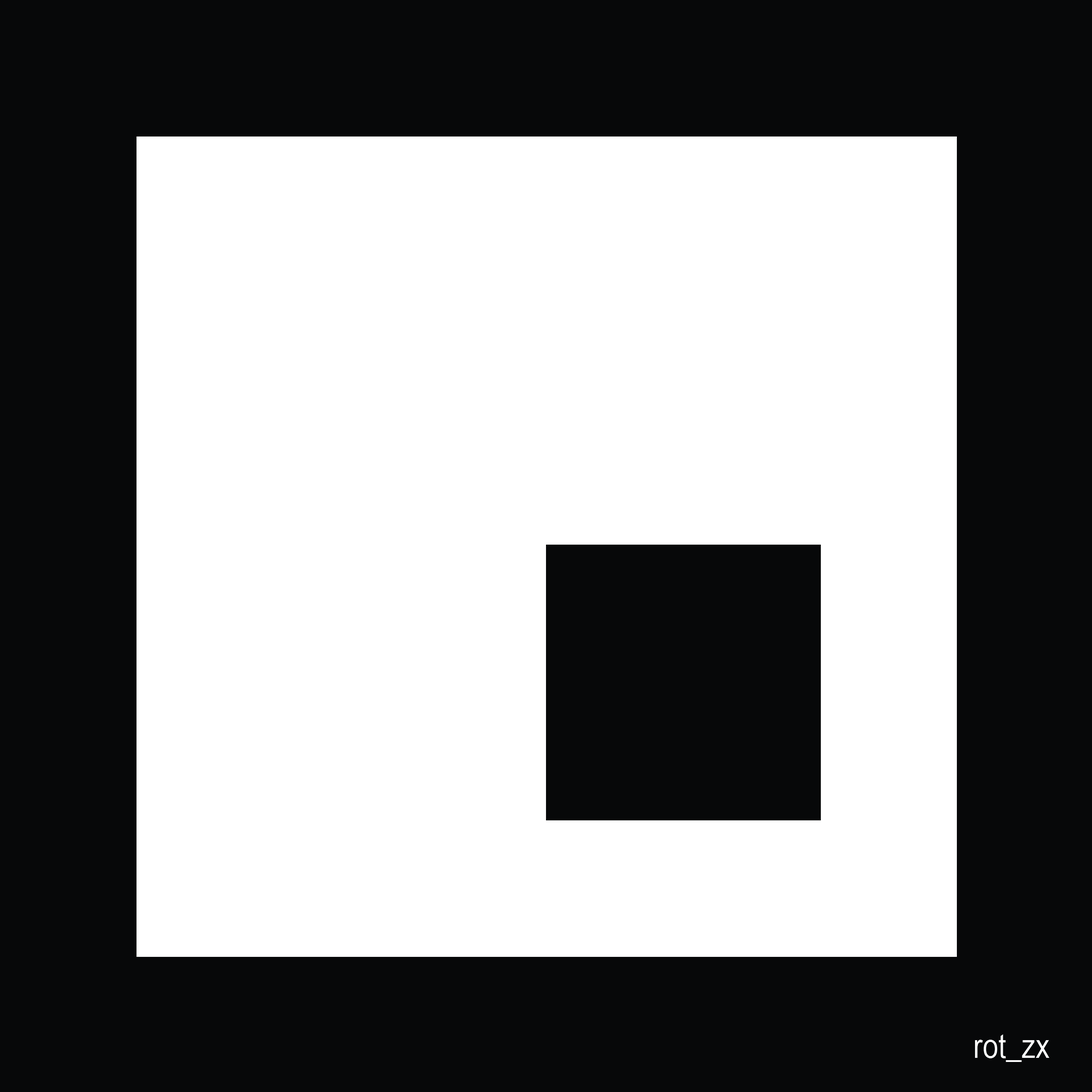
<style>
.page{position:relative;width:1092px;height:1092px;background:#ffffff}
.page>*{position:absolute;margin:0}
.t1{font:34.1px "ArialNarrow";color:#ffffff}
</style>
<div class="page">
<p class="t1" style="left:975px;top:1034px;width:75px;height:28px">rot_zx</p>
</div>
